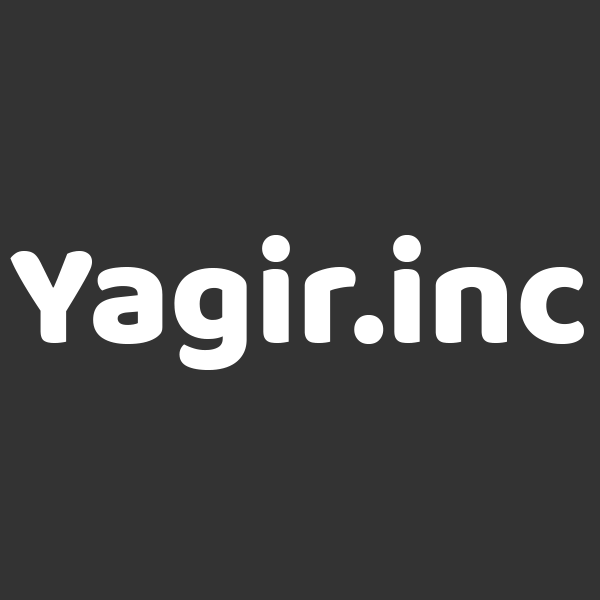
<style>
.page{position:relative;width:600px;height:600px;background:#333333}
.page>*{position:absolute;margin:0}
.t1{font:149.4px "BalooChettan-Regular";color:#ffffff}
</style>
<div class="page">
<p class="t1" style="left:10px;top:235px;width:574px;height:135px">Yagir.inc</p>
</div>
